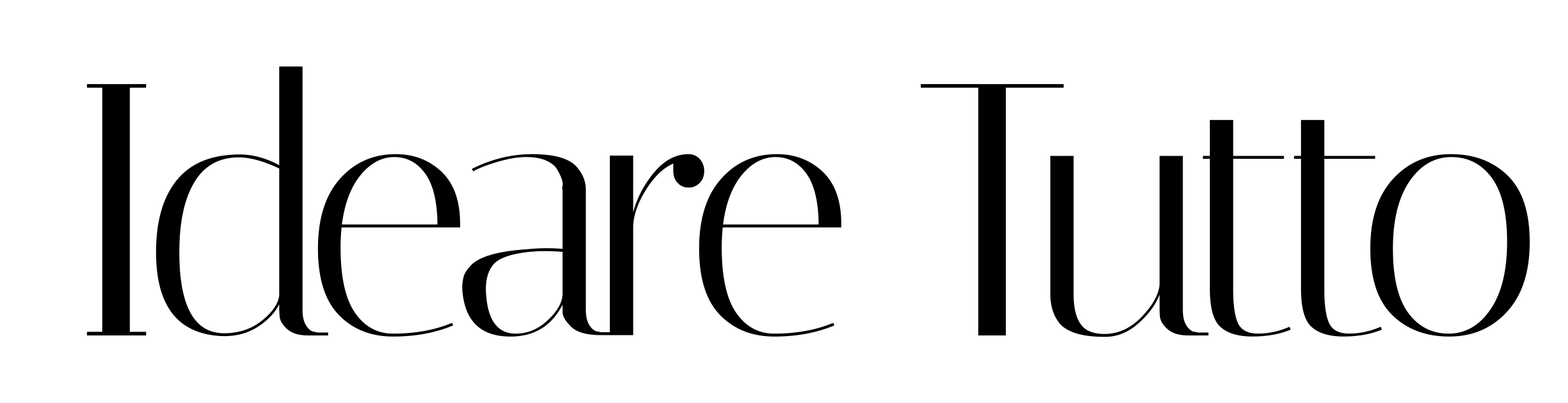
<style>
.page{position:relative;width:1568px;height:403px;background:#ffffff}
.page>*{position:absolute;margin:0}
.t1{font:358.5px "Italiana-Regular";letter-spacing:-0.06em;color:#000000;scale:0.93 1}
</style>
<div class="page">
<p class="t1" style="left:87px;top:66px;width:1443px;height:271px">Ideare Tutto</p>
</div>
